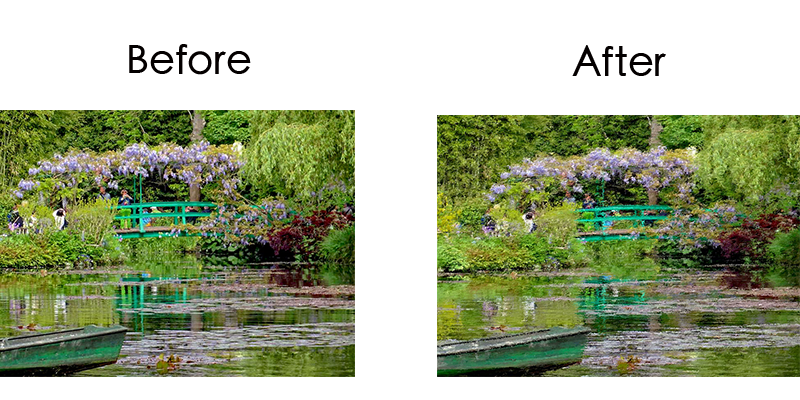
<style>
.page{position:relative;width:800px;height:400px;background:#ffffff}
.page>*{position:absolute;margin:0}
.t1{font:40px "STHeitiTC-Medium";color:#040000}
</style>
<div class="page">
<p class="t1" style="left:129px;top:44px;width:122px;height:31px">Before</p>
<p class="t1" style="left:572px;top:45px;width:94px;height:31px">After</p>
</div>
